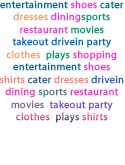
<style>
.page{position:relative;width:125px;height:165px;background:#ffffff}
.page>*{position:absolute;margin:0}
.t1{font:10.4px "MyriadPro-Regular";letter-spacing:0.01em;color:#0066cc;font-weight:bold}
.t2{font:10.4px "MyriadPro-Regular";letter-spacing:0.01em;color:#006699;font-weight:bold}
.t3{font:10.4px "MyriadPro-Regular";letter-spacing:0.01em;color:#ff33cc;font-weight:bold}
.t4{font:10.4px "MyriadPro-Regular";letter-spacing:0.01em;color:#ff9966;font-weight:bold}
.t5{font:10.4px "MyriadPro-Regular";letter-spacing:0.01em;color:#009966;font-weight:bold}
</style>
<div class="page">
<p class="t1" style="left:0px;top:0px;width:124px;height:123px;text-align:center"><span class="t2">entertainment </span><span class="t3">shoes </span><span class="t2">cater </span><span class="t4">dresses </span><span class="t3">dining</span><span class="t5">sports </span><span class="t3">restaurant </span><span class="t5">movies  </span>takeout drivein party <span class="t4">clothes </span><span class="t5"> plays </span><span class="t3">shopping </span><span class="t2">entertainment </span><span class="t3">shoes </span><span class="t4">shirts </span><span class="t2">cater </span><span class="t4">dresses </span>drivein <span class="t3">dining </span><span class="t5">sports </span><span class="t3">restaurant </span><span class="t5">movies  </span>takeout party <span class="t4">clothes </span><span class="t5"> plays </span><span class="t4">shirts </span><span class="t3">shopping</span>takeout</p>
</div>
